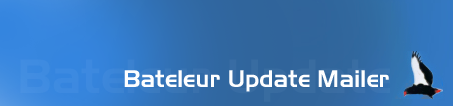
<style>
.page{position:relative;width:453px;height:106px}
.page>*{position:absolute;margin:0}
.t1{font:24px "Slicker";color:#ffffff}
</style>
<div class="page">
<p class="t1" style="left:124px;top:70px;width:265px;height:22px">Bateleur Update Mailer</p>
</div>
